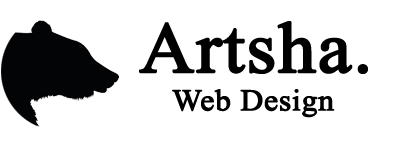
<style>
.page{position:relative;width:400px;height:150px;background:#ffffff}
.page>*{position:absolute;margin:0}
.t1{font:72px "TimesNewRomanPSMT";color:#000000;font-weight:bold;scale:1.05 1}
.t2{font:30px "TimesNewRomanPSMT";color:#000000;font-weight:bold;scale:1.05 1}
</style>
<div class="page">
<p class="t1" style="left:139px;top:21px;width:229px;height:53px">Artsha.</p>
<p class="t2" style="left:172px;top:89px;width:163px;height:29px">Web Design</p>
</div>
